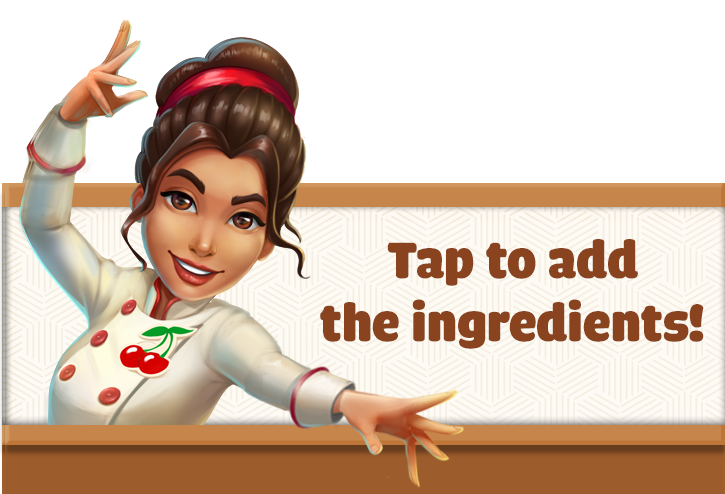
<style>
.page{position:relative;width:725px;height:494px;background:#ffffff}
.page>*{position:absolute;margin:0}
.t1{font:54.2px/62.8px "iCielCadena";color:#89441f}
</style>
<div class="page">
<p class="t1" style="left:320px;top:239px;width:384px;height:110px;text-align:center">Tap to add<br>the ingredients!</p>
</div>
